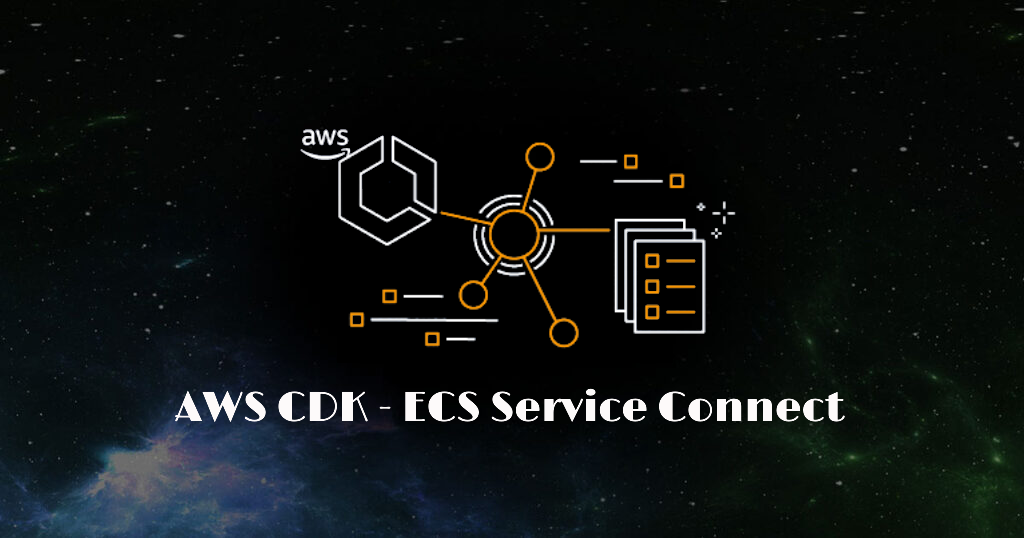
<style>
.page{position:relative;width:1024px;height:538px}
.page>*{position:absolute;margin:0}
.t1{font:42px "Limelight-Regular";color:#fdfafa}
</style>
<div class="page">
<p class="t1" style="left:175px;top:388px;width:670px;height:35px">AWS CDK - ECS Service Connect</p>
</div>
